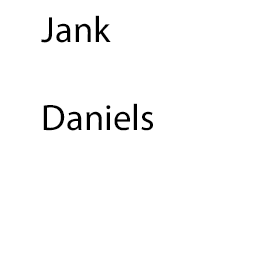
<style>
.page{position:relative;width:256px;height:256px;background:#ffffff}
.page>*{position:absolute;margin:0}
.t1{font:36.8px "MyriadPro-Regular";color:#000000}
</style>
<div class="page">
<p class="t1" style="left:41px;top:15px;width:112px;height:116px">Jank<br><br>Daniels</p>
</div>
